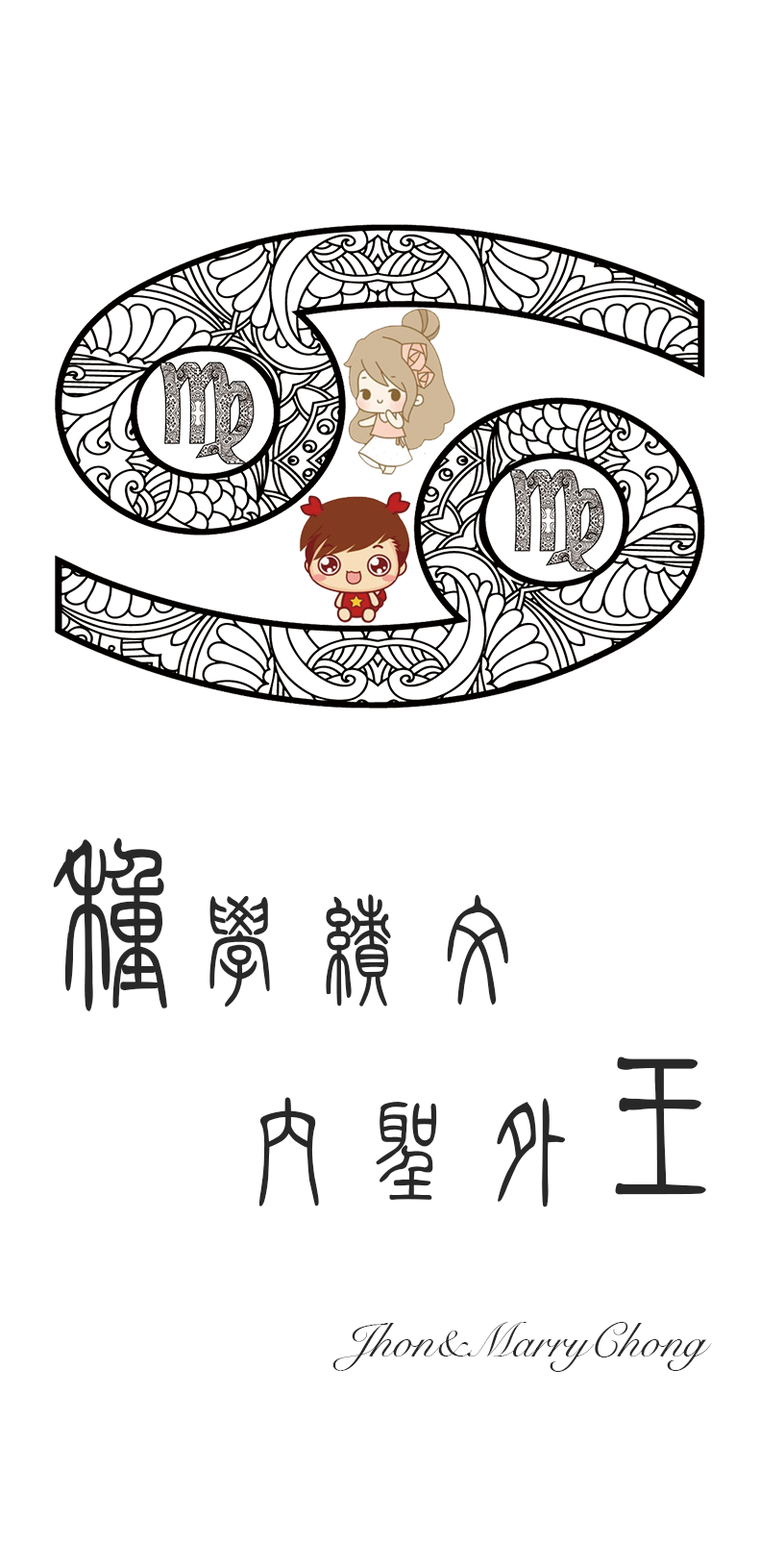
<style>
.page{position:relative;width:760px;height:1568px;background:#ffffff}
.page>*{position:absolute;margin:0}
.t1{font:192.3px "FZXZTFW--GB1-0";color:#282828}
.t2{font:120.2px "FZXZTFW--GB1-0";color:#282828}
.t3{font:48.1px "SnellRoundhand";color:#282828}
</style>
<div class="page">
<p class="t1" style="left:53px;top:837px;width:114px;height:174px">种</p>
<p class="t2" style="left:210px;top:894px;width:299px;height:114px">学绩文</p>
<p class="t1" style="left:615px;top:1057px;width:92px;height:138px">王</p>
<p class="t2" style="left:259px;top:1097px;width:307px;height:110px">内圣外</p>
<p class="t3" style="left:333px;top:1322px;width:379px;height:50px">Jhon&amp;MarryChong</p>
</div>
